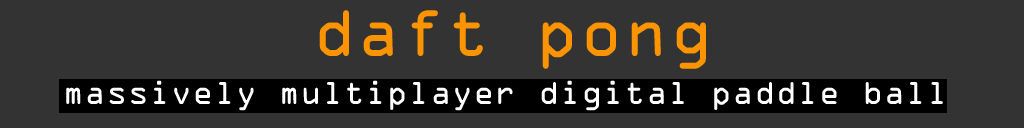
<style>
.page{position:relative;width:1024px;height:128px;background:#333333}
.page>*{position:absolute;margin:0}
.t1{font:61.9px "OCRAStd";color:#fb9400}
.t2{font:30px "OCRAStd";color:#ffffff}
</style>
<div class="page">
<p class="t1" style="left:319px;top:10px;width:387px;height:59px">daft pong</p>
<p class="t2" style="left:66px;top:80px;width:877px;height:31px">massively multiplayer digital paddle ball</p>
</div>
